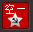
<style>
.page{position:relative;width:33px;height:32px;background:#c50000}
.page>*{position:absolute;margin:0}
.t1{font:10.8px "SimSun";color:#ffffff}
</style>
<div class="page">
<p class="t1" style="left:5px;top:4px;width:20px;height:10px">空一</p>
</div>
